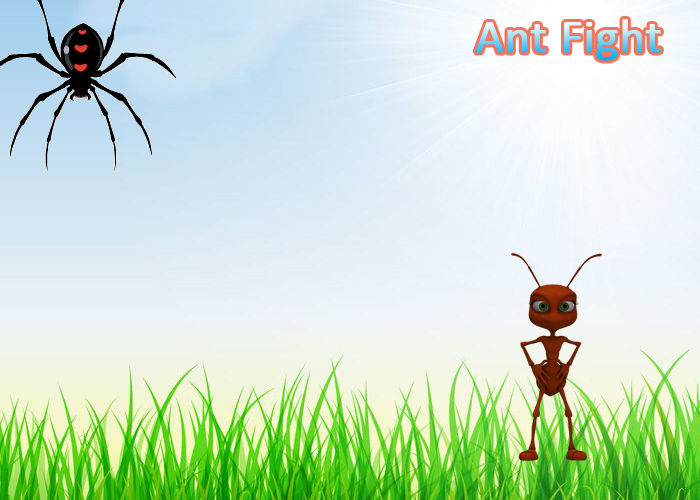
<style>
.page{position:relative;width:700px;height:500px}
.page>*{position:absolute;margin:0}
.t1{font:48px "Calibri";font-weight:bold}
</style>
<div class="page">
<p class="t1" style="left:475px;top:19px;width:186px;height:42px">Ant Fight</p>
</div>
